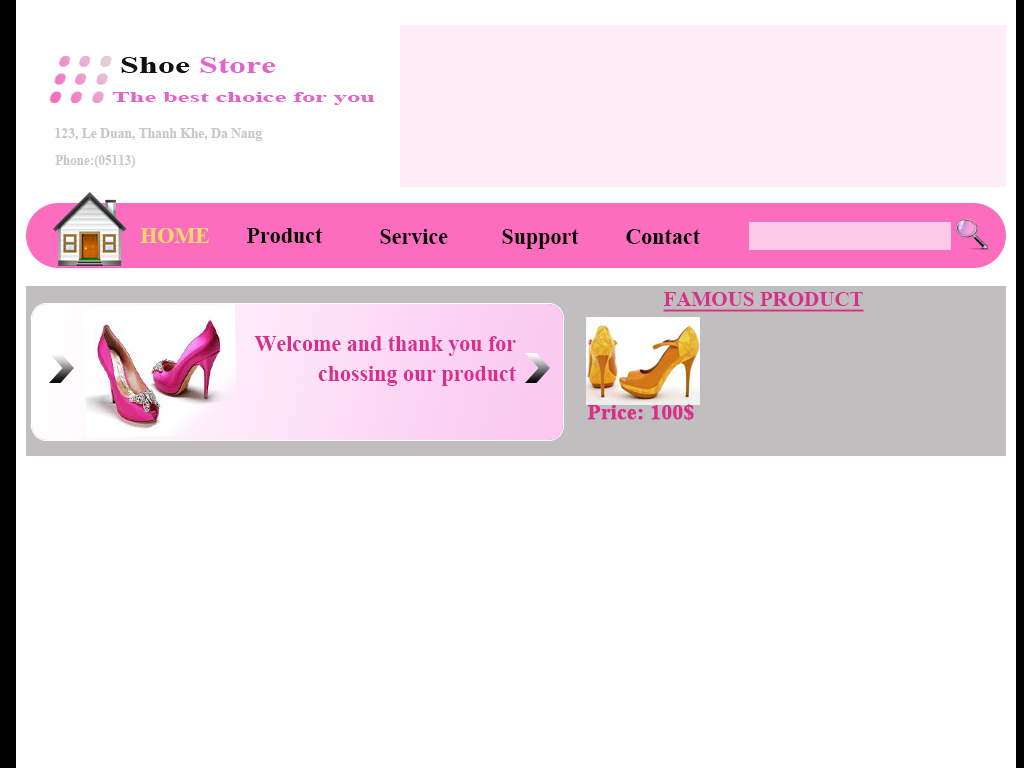
<style>
.page{position:relative;width:1024px;height:768px;background:#ffffff}
.page>*{position:absolute;margin:0}
.t1{font:22px "TimesNewRomanPS-BoldMT";color:#f9db5f}
.t2{font:22px "TimesNewRomanPS-BoldMT";color:#000000}
.t3{font:22.3px "TimesNewRomanPS-BoldMT";color:#000000}
.t4{font:21px "TimesNewRomanPS-BoldMT";color:#d7308c;text-decoration:underline}
.t5{font:22px/30px "TimesNewRomanPS-BoldMT";color:#d7308c}
.t6{font:21px "TimesNewRomanPS-BoldMT";color:#d7308c;font-weight:bold}
</style>
<div class="page">
<p class="t1" style="left:140px;top:228px;width:69px;height:15px">HOME</p>
<p class="t2" style="left:247px;top:228px;width:76px;height:15px">Product</p>
<p class="t3" style="left:380px;top:229px;width:68px;height:15px">Service</p>
<p class="t3" style="left:502px;top:229px;width:77px;height:20px">Support</p>
<p class="t3" style="left:626px;top:229px;width:74px;height:15px">Contact</p>
<p class="t4" style="left:663px;top:292px;width:201px;height:20px">FAMOUS PRODUCT</p>
<p class="t5" style="left:254px;top:336px;width:262px;height:50px">Welcome and thank you for chossing our product</p>
<p class="t6" style="left:587px;top:404px;width:107px;height:17px">Price: 100$</p>
</div>
